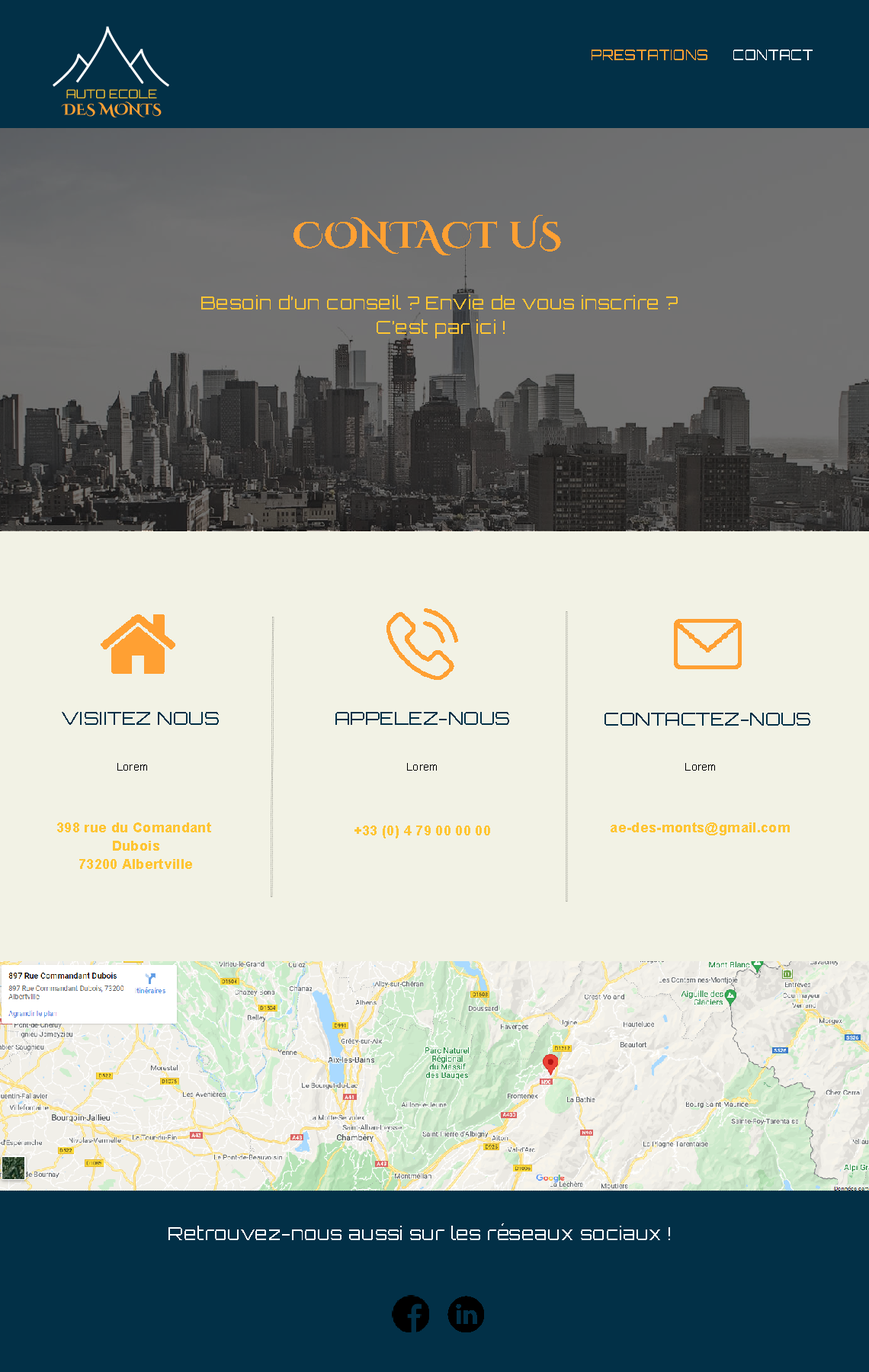
<style>
.page{position:relative;width:869px;height:1372px;background:#f2f2e5}
.page>*{position:absolute;margin:0}
.t1{font:13.7px "Orbitron-Regular";letter-spacing:0.02em;color:#ffa033}
.t2{font:13.7px "Orbitron-Regular";letter-spacing:0.02em;color:#fefefe}
.t3{font:36.6px "CinzelDecorative-Bold";letter-spacing:0.02em;color:#ffa033}
.t4{font:18.3px "Orbitron-Regular";letter-spacing:0.02em;color:#ffc533}
.t5{font:18.3px "Orbitron-Regular";letter-spacing:0.02em;color:#023047}
.t6{font:10.7px "ArialMT";letter-spacing:0.02em;color:#010101}
.t7{font:10.7px "ArialMT";letter-spacing:0.02em;color:#000000}
.t8{font:13.7px/18.3px "Arial-BoldMT";letter-spacing:0.02em;color:#ffc533}
.t9{font:13.7px "Arial-BoldMT";letter-spacing:0.02em;color:#ffc533}
.t10{font:18.3px "Orbitron-Regular";letter-spacing:0.02em;color:#feffff}
</style>
<div class="page">
<p class="t1" style="left:592px;top:50px;width:221px;height:10px">PRESTATIONS      <span class="t2">CONTACT</span></p>
<p class="t3" style="left:293px;top:215px;width:268px;height:40px">CONTACT US</p>
<p class="t4" style="left:201px;top:295px;width:477px;height:14px">Besoin d’un conseil ? Envie de vous inscrire ?</p>
<p class="t4" style="left:377px;top:319px;width:128px;height:19px">C’est par ici !</p>
<p class="t5" style="left:62px;top:712px;width:157px;height:13px">VISIITEZ NOUS</p>
<p class="t5" style="left:335px;top:712px;width:174px;height:13px">APPELEZ-NOUS</p>
<p class="t5" style="left:605px;top:713px;width:205px;height:13px">CONTACTEZ-NOUS</p>
<p class="t6" style="left:117px;top:763px;width:30px;height:8px">Lorem</p>
<p class="t7" style="left:407px;top:763px;width:30px;height:8px">Lorem</p>
<p class="t7" style="left:685px;top:763px;width:30px;height:8px">Lorem</p>
<p class="t8" style="left:57px;top:823px;width:154px;height:46px;text-align:center">398 rue du Comandant <br>Dubois<br>73200 Albertville</p>
<p class="t9" style="left:354px;top:826px;width:136px;height:13px">+33 (0) 4 79 00 00 00</p>
<p class="t9" style="left:611px;top:823px;width:179px;height:12px">ae-des-monts@gmail.com</p>
<p class="t10" style="left:168px;top:1223px;width:502px;height:17px">Retrouvez-nous aussi sur les réseaux sociaux !</p>
</div>
